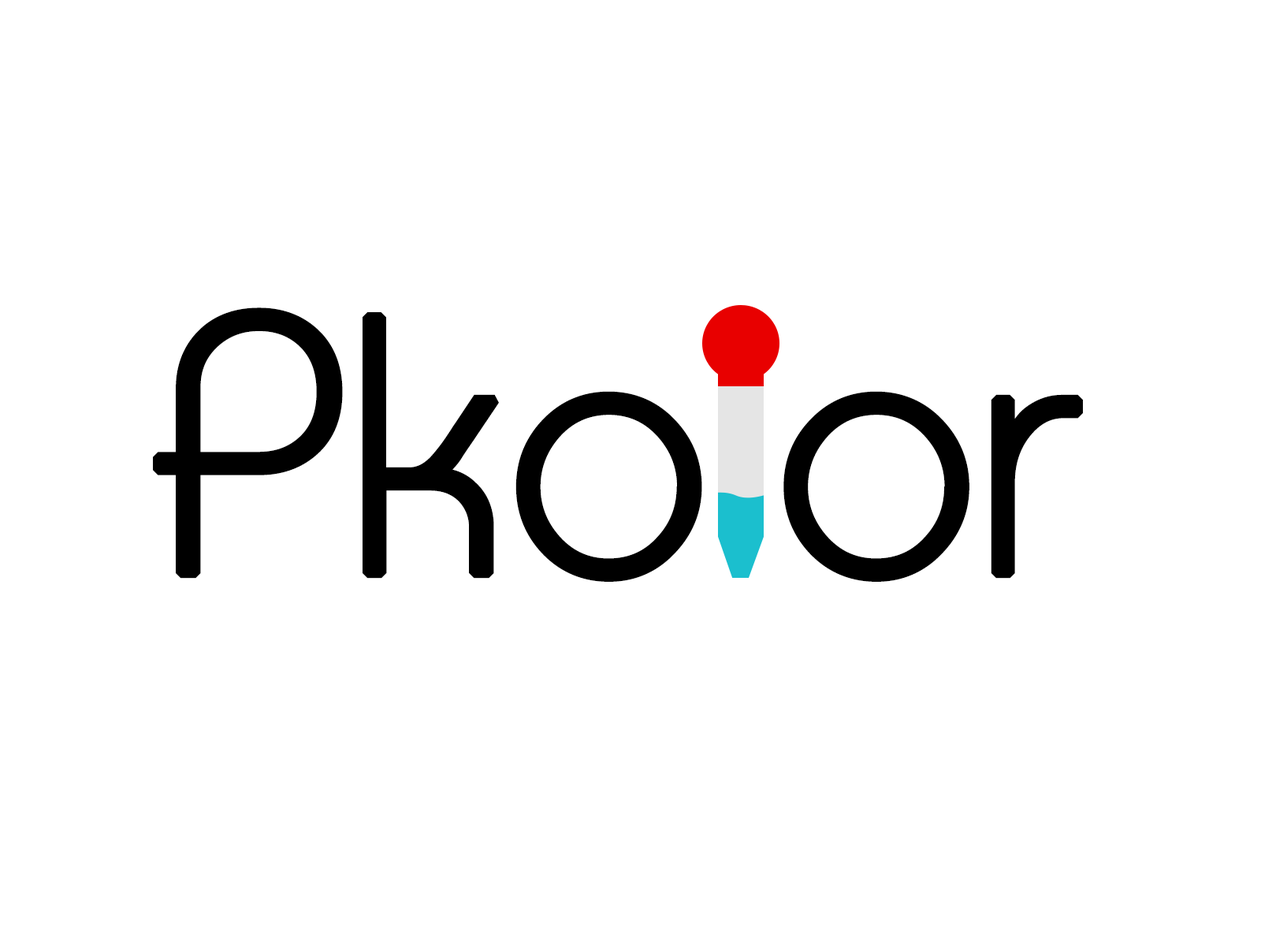
<style>
.page{position:relative;width:1261px;height:946px;background:#ffffff}
.page>*{position:absolute;margin:0}
.t1{font:367.5px "MonaKo";letter-spacing:-0.04em;color:#000000;font-weight:bold}
.t2{font:367.5px "MonaKo";letter-spacing:-0.02em;color:#000000;font-weight:bold}
</style>
<div class="page">
<p class="t1" style="left:153px;top:307px;width:930px;height:275px"><span class="t2">P</span>ko or</p>
</div>
